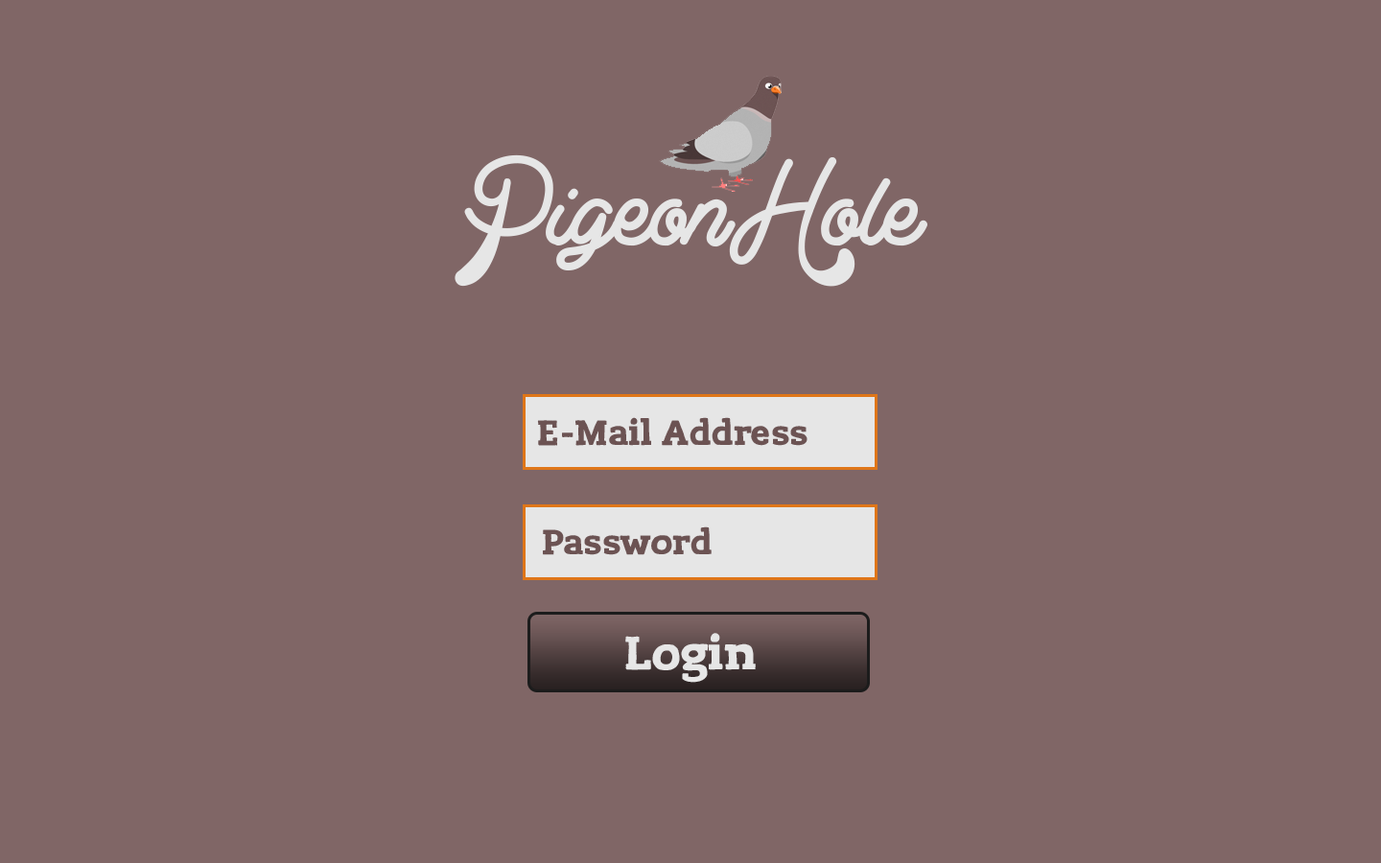
<style>
.page{position:relative;width:1381px;height:863px;background:#806666}
.page>*{position:absolute;margin:0}
.t1{font:134.3px "ClearLine-PERSONALUSEONLY";color:#e6e6e6}
.t2{font:34.5px "LevSerif-Handcut";color:#6c5353}
.t3{font:46px "LevSerif-Handcut";color:#e6e6e6}
</style>
<div class="page">
<p class="t1" style="left:455px;top:154px;width:473px;height:133px">PigeonHole</p>
<p class="t2" style="left:537px;top:417px;width:271px;height:29px">E-Mail Address</p>
<p class="t2" style="left:543px;top:527px;width:169px;height:28px">Password</p>
<p class="t3" style="left:625px;top:633px;width:131px;height:50px">Login</p>
</div>
